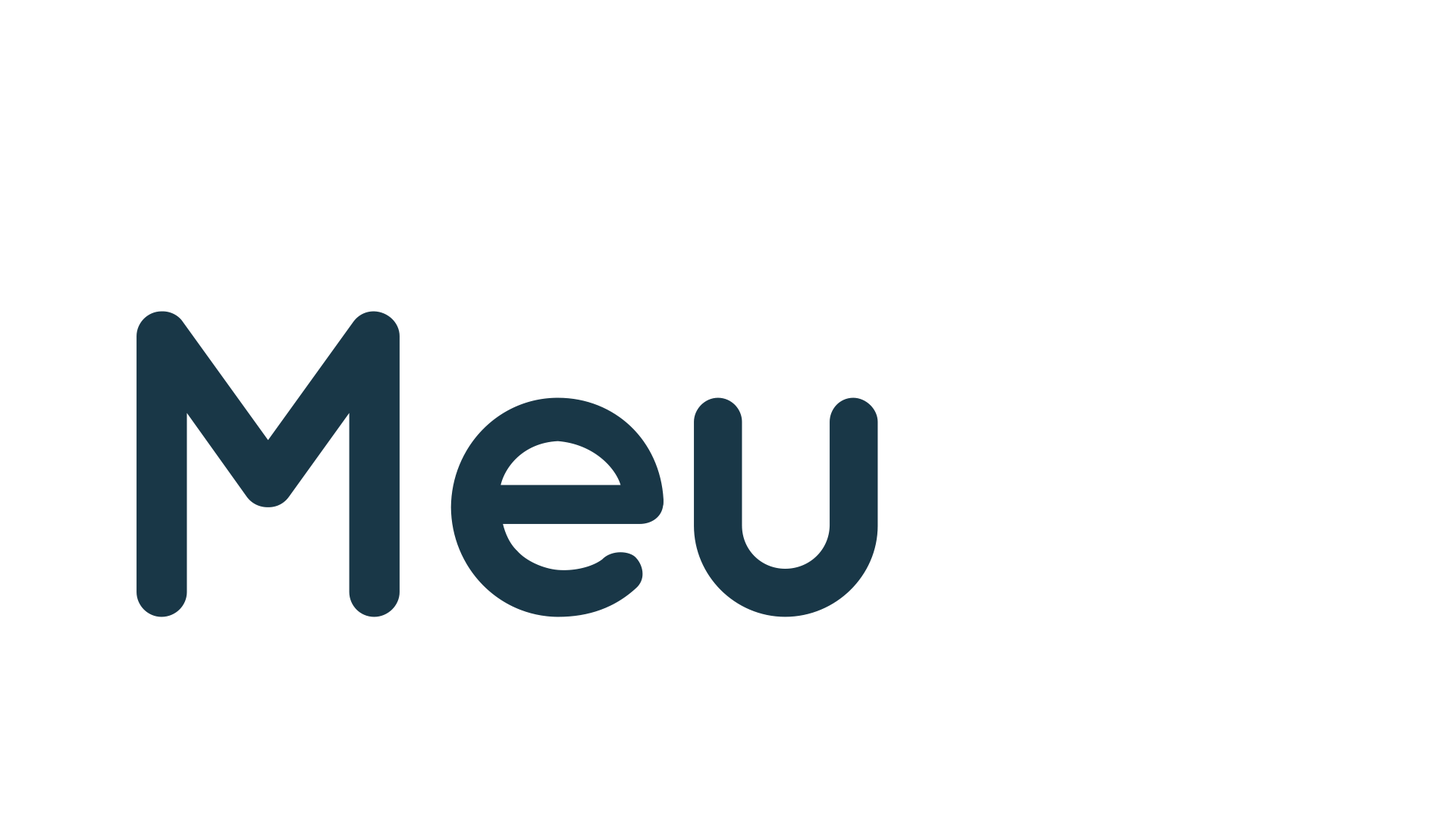
<style>
.page{position:relative;width:1456px;height:819px;background:#ffffff}
.page>*{position:absolute;margin:0}
.t1{font:433.6px "QuicksandBold-Regular";letter-spacing:-0.1em;color:#193747;font-weight:bold}
</style>
<div class="page">
<p class="t1" style="left:136px;top:311px;width:742px;height:306px">Meu</p>
</div>
